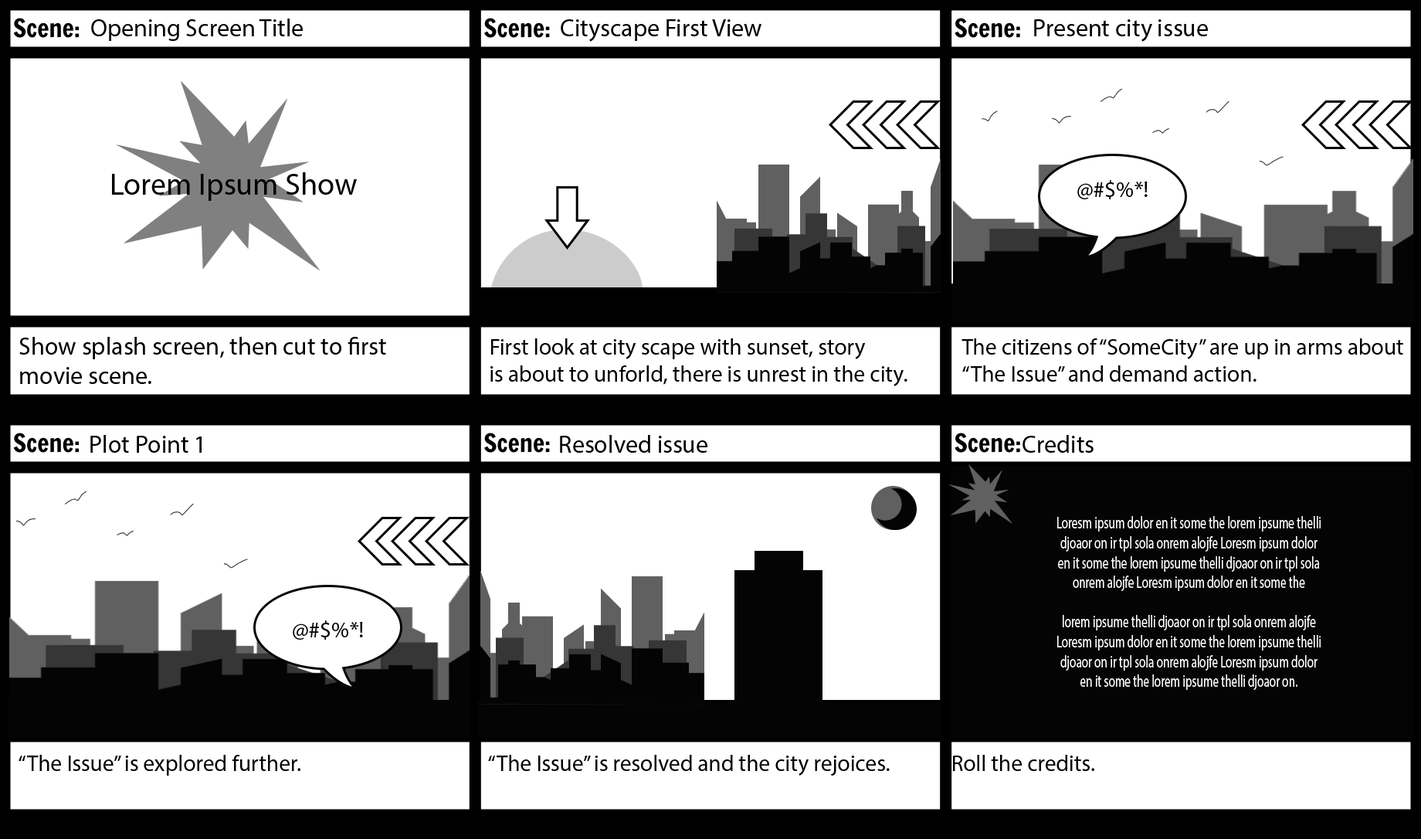
<style>
.page{position:relative;width:1421px;height:839px;background:#ffffff}
.page>*{position:absolute;margin:0}
.t1{font:24.7px "MyriadPro-Regular";color:#000000}
.t2{font:24.8px "MyriadPro-Regular";color:#000000}
.t3{font:30.9px "MyriadPro-Regular";color:#000000}
.t4{font:22.6px "MyriadPro-Regular";color:#000000}
.t5{font:22.7px "MyriadPro-Regular";color:#000000}
.t6{font:16.5px "MyriadPro-Regular";color:#ffffff;scale:0.71 1}
</style>
<div class="page">
<p class="t1" style="left:91px;top:19px;width:212px;height:22px">Opening Screen Title</p>
<p class="t1" style="left:561px;top:19px;width:201px;height:23px">Cityscape First View</p>
<p class="t2" style="left:1034px;top:19px;width:174px;height:23px">Present city issue</p>
<p class="t3" style="left:112px;top:172px;width:245px;height:29px">Lorem Ipsum Show</p>
<p class="t4" style="left:1078px;top:180px;width:70px;height:19px">@#$%*!</p>
<p class="t1" style="left:19px;top:337px;width:367px;height:47px">Show splash screen, then cut to first <br>movie scene.</p>
<p class="t5" style="left:491px;top:338px;width:417px;height:48px">First look at city scape with sunset, story <br>is about to unforld, there is unrest in the city.</p>
<p class="t5" style="left:962px;top:338px;width:442px;height:44px">The citizens of “SomeCity” are up in arms about<br>“The Issue” and demand action.</p>
<p class="t1" style="left:90px;top:435px;width:112px;height:18px">Plot Point 1</p>
<p class="t2" style="left:560px;top:435px;width:148px;height:18px">Resolved issue</p>
<p class="t2" style="left:1023px;top:435px;width:71px;height:18px">Credits</p>
<p class="t6" style="left:1058px;top:516px;width:263px;height:174px;text-align:center">Loresm ipsum dolor en it some the lorem ipsume thelli djoaor on ir tpl sola onrem alojfe Loresm ipsum dolor en it some the lorem ipsume thelli djoaor on ir tpl sola onrem alojfe Loresm ipsum dolor en it some the <br><br>lorem ipsume thelli djoaor on ir tpl sola onrem alojfe Loresm ipsum dolor en it some the lorem ipsume thelli djoaor on ir tpl sola onrem alojfe Loresm ipsum dolor en it some the lorem ipsume thelli djoaor on.</p>
<p class="t4" style="left:293px;top:620px;width:70px;height:20px">@#$%*!</p>
<p class="t5" style="left:19px;top:755px;width:281px;height:21px">“The Issue” is explored further.</p>
<p class="t5" style="left:488px;top:755px;width:402px;height:21px">“The Issue” is resolved and the city rejoices.</p>
<p class="t5" style="left:953px;top:755px;width:142px;height:16px">Roll the credits.</p>
</div>
